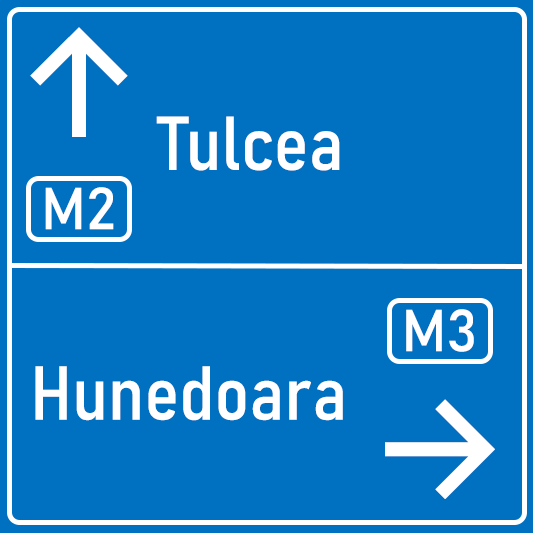
<style>
.page{position:relative;width:533px;height:533px;background:#0070c0}
.page>*{position:absolute;margin:0}
.t1{font:150px "Inter-Medium";color:#ffffff}
.t2{font:75px "Bahnschrift-SemiCondensed";color:#ffffff}
.t3{font:58.3px "Bahnschrift";color:#ffffff}
</style>
<div class="page">
<p class="t1" style="left:30px;top:27px;width:98px;height:110px">↑</p>
<p class="t2" style="left:156px;top:116px;width:184px;height:55px">Tulcea</p>
<p class="t3" style="left:45px;top:187px;width:69px;height:43px">M2</p>
<p class="t3" style="left:406px;top:309px;width:68px;height:43px">M3</p>
<p class="t2" style="left:35px;top:366px;width:308px;height:55px">Hunedoara</p>
<p class="t1" style="left:385px;top:399px;width:110px;height:100px">→</p>
</div>
